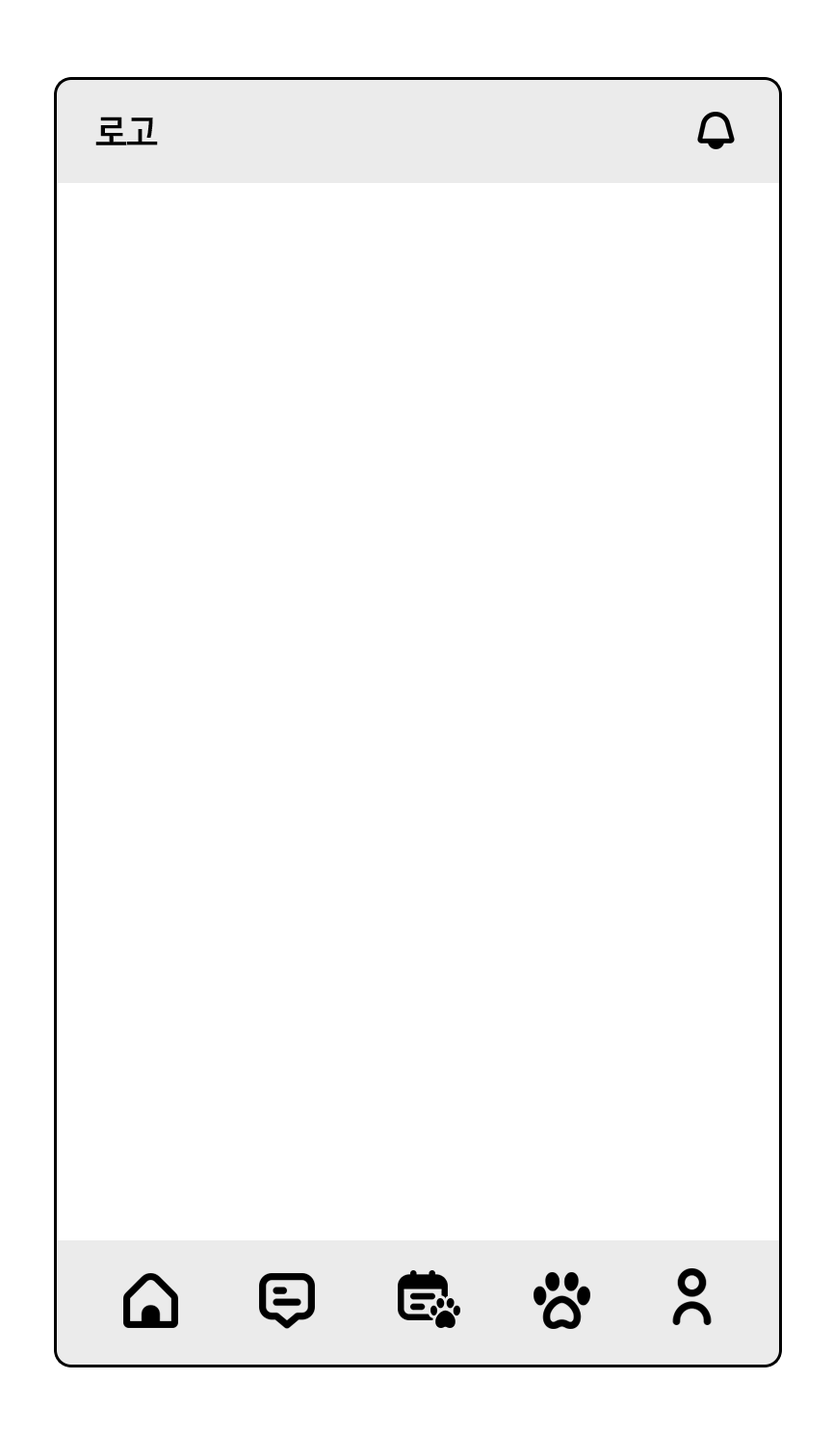
<style>
.page{position:relative;width:833px;height:1432px;background:#ffffff}
.page>*{position:absolute;margin:0}
.t1{font:38.1px "NanumBarunGothicOTF";letter-spacing:-0.025em;color:#010101;font-weight:bold;scale:0.91 1}
</style>
<div class="page">
<p class="t1" style="left:95px;top:117px;width:63px;height:28px">로고</p>
</div>
